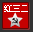
<style>
.page{position:relative;width:33px;height:32px;background:#c50000}
.page>*{position:absolute;margin:0}
.t1{font:10.4px "SimSun";letter-spacing:-0.25em;color:#ffffff}
</style>
<div class="page">
<p class="t1" style="left:4px;top:5px;width:24px;height:7px">红三二</p>
</div>
